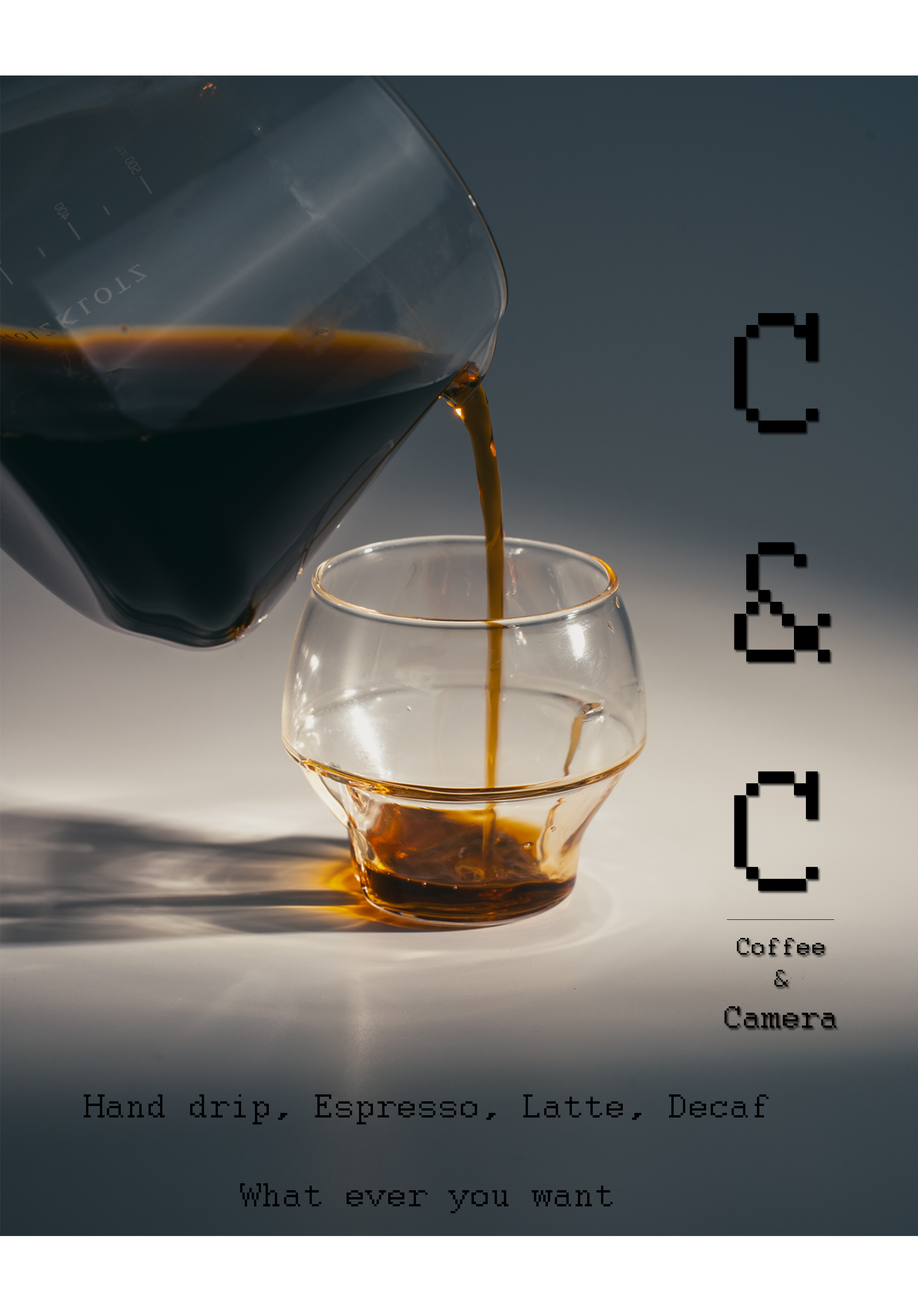
<style>
.page{position:relative;width:918px;height:1299px}
.page>*{position:absolute;margin:0}
.t1{font:190.9px "Courier";color:#000000}
.t2{font:26.7px "Courier";color:#000000}
.t3{font:34.4px "Courier";color:#000000}
.t4{font:37px "Courier";color:#000000}
</style>
<div class="page">
<p class="t1" style="left:734px;top:313px;width:96px;height:577px;text-align:center">C<br>&amp;<br>C</p>
<p class="t2" style="left:724px;top:938px;width:113px;height:89px;text-align:center">Coffee<br>&amp;<br><span class="t3">Camera</span></p>
<p class="t4" style="left:84px;top:1094px;width:685px;height:119px;text-align:center">Hand drip, Espresso, Latte, Decaf  <br><br>What ever you want</p>
</div>
